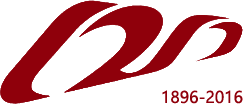
<style>
.page{position:relative;width:243px;height:104px;background:#ffffff}
.page>*{position:absolute;margin:0}
.t1{font:16px "MicrosoftYaHei";color:#8f000b}
</style>
<div class="page">
<p class="t1" style="left:162px;top:90px;width:81px;height:14px">1896-2016</p>
</div>
